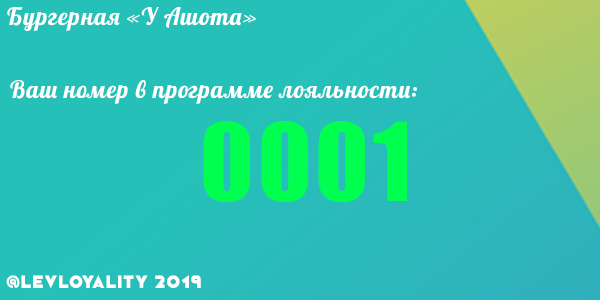
<style>
.page{position:relative;width:600px;height:300px;background:#25c1b9}
.page>*{position:absolute;margin:0}
.t1{font:24px "Lobster";letter-spacing:0.04em;color:#ffffff}
.t2{font:100px "Impact";letter-spacing:0.04em;color:#00ff4e}
.t3{font:18px "Coven-Filled";letter-spacing:0.04em;color:#ffffff}
</style>
<div class="page">
<p class="t1" style="left:7px;top:7px;width:249px;height:24px">Бургерная «У Ашота»</p>
<p class="t1" style="left:10px;top:80px;width:407px;height:24px">Ваш номер в программе лояльности:</p>
<p class="t2" style="left:203px;top:121px;width:204px;height:81px">0001</p>
<p class="t3" style="left:6px;top:275px;width:195px;height:13px">@LEVLoyality 2019</p>
</div>
